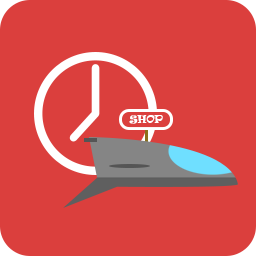
<style>
.page{position:relative;width:256px;height:256px;background:#db3f3d}
.page>*{position:absolute;margin:0}
.t1{font:9.9px "Ravie";color:#ffffff}
</style>
<div class="page">
<p class="t1" style="left:129px;top:115px;width:34px;height:9px">SHOP</p>
</div>
